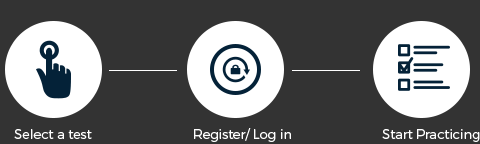
<style>
.page{position:relative;width:480px;height:144px;background:#333333}
.page>*{position:absolute;margin:0}
.t1{font:13.3px "Montserrat-Light";letter-spacing:-0.01em;color:#ffffff}
</style>
<div class="page">
<p class="t1" style="left:14px;top:129px;width:78px;height:10px">Select a test</p>
<p class="t1" style="left:194px;top:128px;width:97px;height:14px">Register/ Log in</p>
<p class="t1" style="left:382px;top:129px;width:98px;height:13px">Start Practicing</p>
</div>
